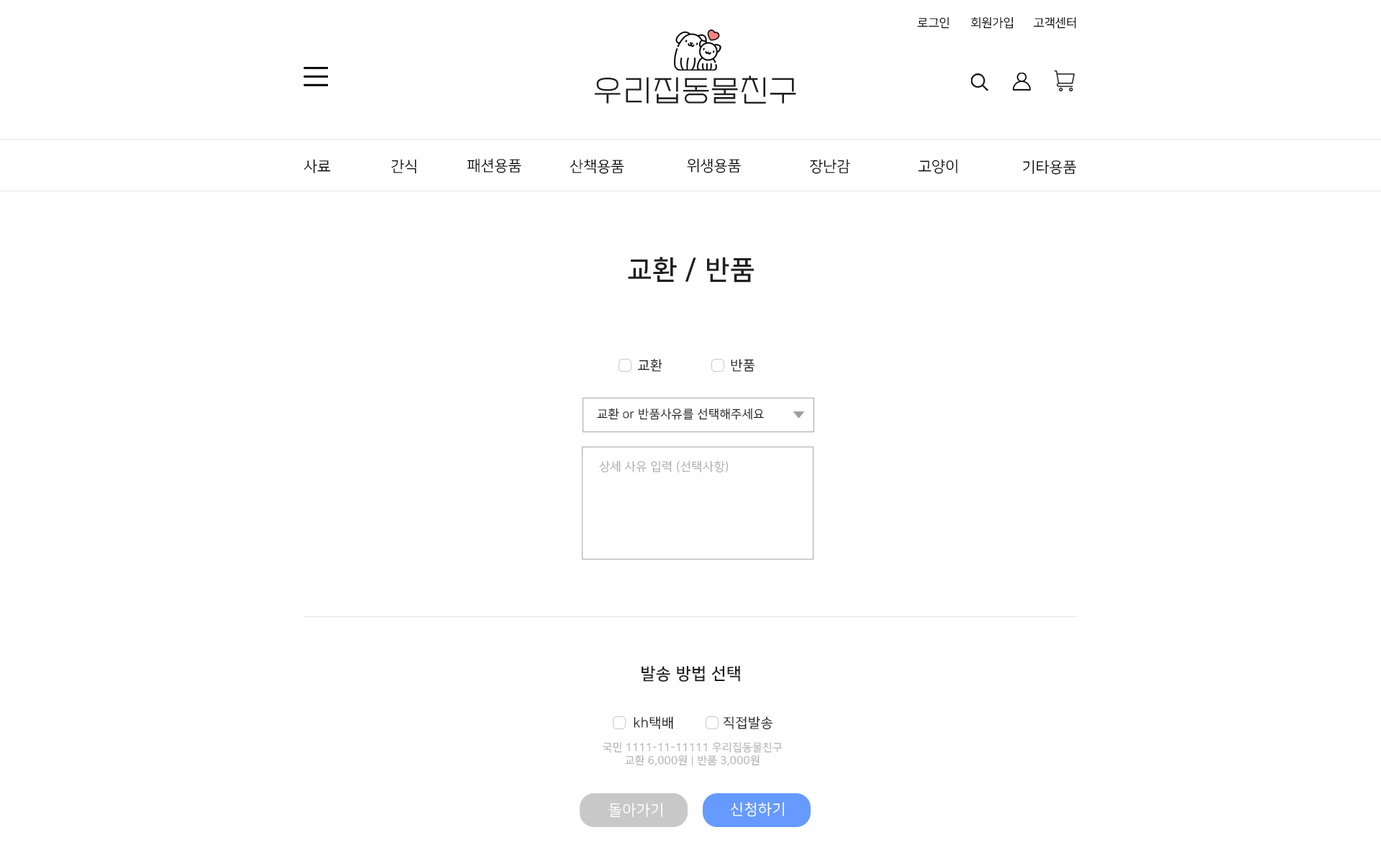
<style>
.page{position:relative;width:1381px;height:863px;background:#ffffff}
.page>*{position:absolute;margin:0}
.t1{font:12px "NanumSquareR";color:#000000}
.t2{font:30px "EF_watermelonSalad";letter-spacing:0.025em;color:#202020}
.t3{font:15px "NanumSquareR";color:#000000}
.t4{font:27px "NanumSquareB";letter-spacing:0.025em;color:#202020}
.t5{font:13.5px "NanumSquareR";letter-spacing:0.025em;color:#202020}
.t6{font:12px "NanumSquareR";letter-spacing:0.025em;color:#202020}
.t7{font:12px "NanumSquareR";letter-spacing:0.025em;color:#afafaf}
.t8{font:16.5px "NanumSquareB";letter-spacing:0.025em;color:#202020}
.t9{font:10.8px "NanumSquareR";letter-spacing:0.025em;color:#afafaf}
.t10{font:15px "NanumSquareR";letter-spacing:0.025em;color:#ffffff}
</style>
<div class="page">
<p class="t1" style="left:917px;top:17px;width:33px;height:12px">로그인</p>
<p class="t1" style="left:971px;top:17px;width:43px;height:12px">회원가입</p>
<p class="t1" style="left:1034px;top:17px;width:42px;height:12px">고객센터</p>
<p class="t2" style="left:594px;top:76px;width:202px;height:28px">우리집동물친구</p>
<p class="t3" style="left:304px;top:159px;width:27px;height:14px">사료</p>
<p class="t3" style="left:391px;top:159px;width:26px;height:15px">간식</p>
<p class="t3" style="left:467px;top:158px;width:55px;height:15px">패션용품</p>
<p class="t3" style="left:570px;top:159px;width:54px;height:15px">산책용품</p>
<p class="t3" style="left:687px;top:158px;width:54px;height:15px">위생용품</p>
<p class="t3" style="left:810px;top:159px;width:40px;height:15px">장난감</p>
<p class="t3" style="left:918px;top:159px;width:40px;height:15px">고양이</p>
<p class="t3" style="left:1023px;top:160px;width:54px;height:15px">기타용품</p>
<p class="t4" style="left:628px;top:257px;width:126px;height:26px">교환 / 반품</p>
<p class="t5" style="left:637px;top:359px;width:26px;height:13px">교환</p>
<p class="t5" style="left:731px;top:359px;width:24px;height:13px">반품</p>
<p class="t6" style="left:597px;top:408px;width:167px;height:12px">교환 or 반품사유를 선택해주세요</p>
<p class="t7" style="left:599px;top:460px;width:130px;height:13px">상세 사유 입력 (선택사항)</p>
<p class="t8" style="left:642px;top:666px;width:98px;height:16px">발송 방법 선택</p>
<p class="t5" style="left:634px;top:717px;width:39px;height:12px">kh택배</p>
<p class="t5" style="left:723px;top:717px;width:50px;height:13px">직접발송</p>
<p class="t9" style="left:602px;top:742px;width:181px;height:24px;text-align:center">국민 1111-11-11111 우리집동물친구<br>교환 6,000원 | 반품 3,000원</p>
<p class="t10" style="left:609px;top:803px;width:54px;height:15px">돌아가기</p>
<p class="t10" style="left:730px;top:802px;width:54px;height:15px">신청하기</p>
</div>
